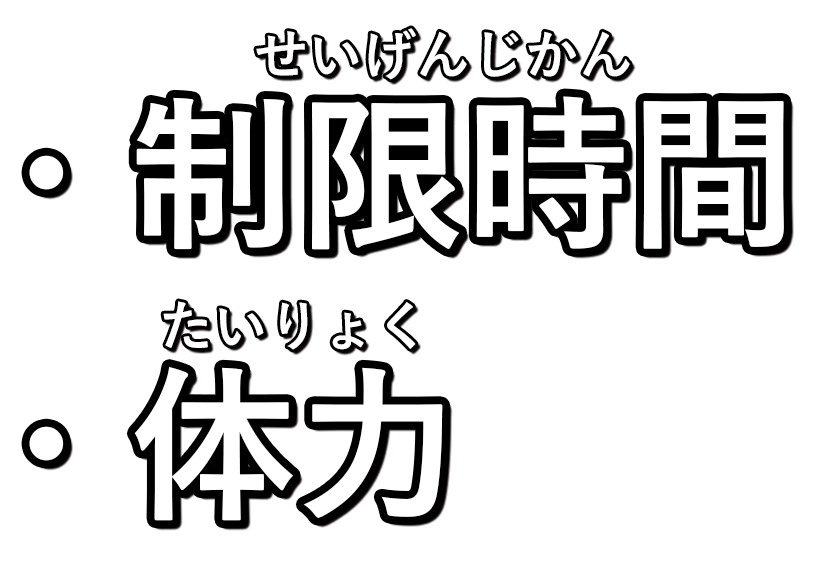
<style>
.page{position:relative;width:832px;height:588px;background:#ffffff}
.page>*{position:absolute;margin:0}
.t1{font:166.7px "YuGothic-Bold";color:#ffffff}
</style>
<div class="page">
<p class="t1" style="left:29px;top:96px;width:755px;height:154px">・制限時間</p>
<p class="t1" style="left:29px;top:367px;width:414px;height:154px">・体力</p>
</div>
